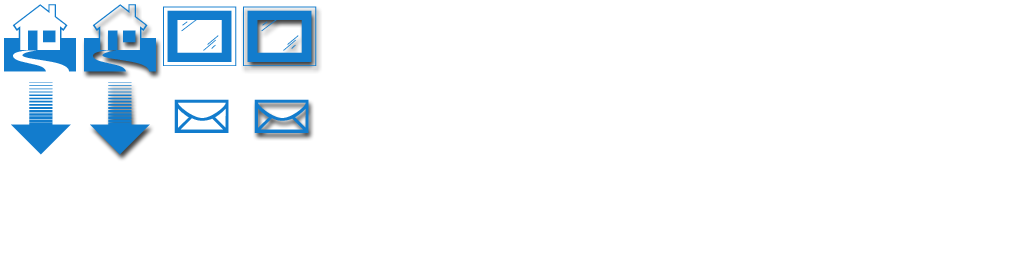
<style>
.page{position:relative;width:1024px;height:256px;background:#ffffff}
.page>*{position:absolute;margin:0}
.t1{font:60px "Art-Supplies-JL";color:#127ccd}
.t2{font:60px "PizzaDudePointers";color:#127ccd}
.t3{font:72px "Cairo";color:#127ccd}
</style>
<div class="page">
<p class="t1" style="left:163px;top:6px;width:74px;height:60px">k</p>
<p class="t1" style="left:243px;top:6px;width:74px;height:60px">k</p>
<p class="t2" style="left:11px;top:82px;width:60px;height:73px">WY</p>
<p class="t2" style="left:90px;top:82px;width:60px;height:73px">WY</p>
<p class="t3" style="left:174px;top:99px;width:55px;height:34px">S</p>
<p class="t3" style="left:254px;top:99px;width:55px;height:34px">S</p>
</div>
